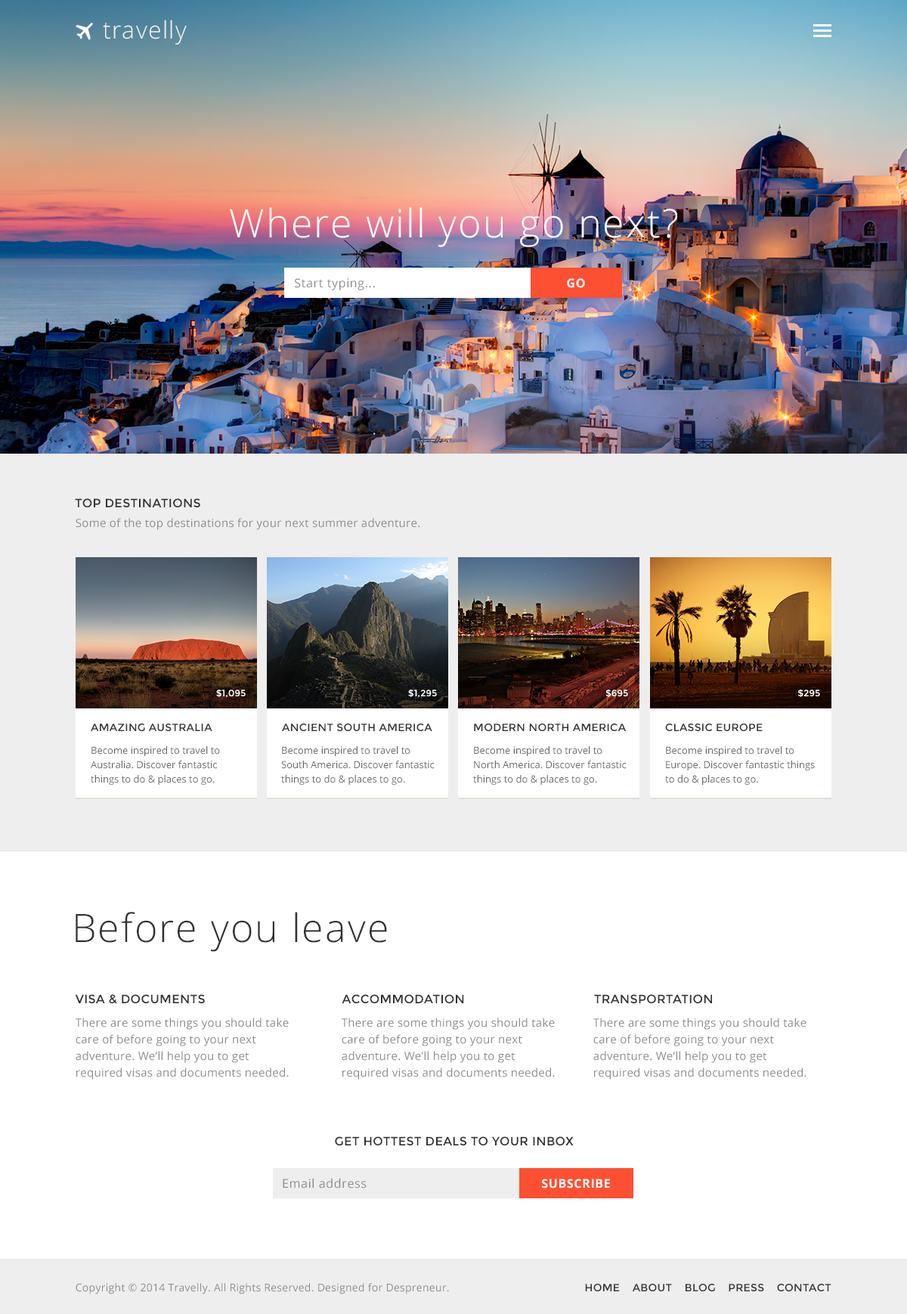
<style>
.page{position:relative;width:907px;height:1314px;background:#ffffff}
.page>*{position:absolute;margin:0}
.t1{font:24.2px "OpenSans-Light";letter-spacing:0.04em;color:#f4f3ee}
.t2{font:39.3px "OpenSans-Light";letter-spacing:0.04em;color:#ffffff}
.t3{font:12.1px "OpenSans";letter-spacing:0.04em;color:#8b8b8b}
.t4{font:12.1px "OpenSans-Bold";letter-spacing:0.04em;color:#ffffff}
.t5{font:12.1px "Montserrat-Regular";letter-spacing:0.02em;color:#323232;text-transform:uppercase}
.t6{font:11.3px "OpenSans";letter-spacing:0.02em;color:#8b8b8b}
.t7{font:9.1px "Montserrat-Regular";letter-spacing:0.02em;color:#ffffff;text-transform:uppercase}
.t8{font:10.6px "Montserrat-Regular";letter-spacing:0.02em;color:#323232;text-transform:uppercase}
.t9{font:9.8px/14.4px "OpenSans";color:#696969}
.t10{font:39.3px "OpenSans-Light";letter-spacing:0.04em;color:#323232}
.t11{font:11.3px/16.6px "OpenSans";letter-spacing:0.02em;color:#8b8b8b}
.t12{font:10.6px "OpenSans";letter-spacing:0.02em;color:#8b8b8b}
</style>
<div class="page">
<p class="t1" style="left:103px;top:20px;width:84px;height:25px">travelly</p>
<p class="t2" style="left:230px;top:207px;width:448px;height:40px">Where will you go next?</p>
<p class="t3" style="left:295px;top:278px;width:80px;height:12px">Start typing...</p>
<p class="t4" style="left:567px;top:278px;width:18px;height:10px">GO</p>
<p class="t5" style="left:75px;top:498px;width:125px;height:10px">Top destinations</p>
<p class="t6" style="left:76px;top:518px;width:344px;height:12px">Some of the top destinations for your next summer adventure.</p>
<p class="t7" style="left:216px;top:690px;width:30px;height:8px">$1,095</p>
<p class="t7" style="left:408px;top:690px;width:29px;height:8px">$1,295</p>
<p class="t7" style="left:606px;top:690px;width:22px;height:7px">$695</p>
<p class="t7" style="left:798px;top:690px;width:22px;height:7px">$295</p>
<p class="t8" style="left:91px;top:724px;width:121px;height:7px">Amazing Australia</p>
<p class="t8" style="left:282px;top:724px;width:151px;height:7px">ancient south america</p>
<p class="t8" style="left:474px;top:724px;width:153px;height:7px">modern north america</p>
<p class="t8" style="left:665px;top:724px;width:98px;height:7px">Classic europe</p>
<p class="t9" style="left:91px;top:746px;width:129px;height:39px">Become inspired to travel to Australia. Discover fantastic things to do &amp; places to go.</p>
<p class="t9" style="left:281px;top:746px;width:154px;height:39px">Become inspired to travel to South America. Discover fantastic things to do &amp; places to go.</p>
<p class="t9" style="left:473px;top:746px;width:154px;height:39px">Become inspired to travel to North America. Discover fantastic things to do &amp; places to go.</p>
<p class="t9" style="left:665px;top:746px;width:150px;height:39px">Become inspired to travel to Europe. Discover fantastic things to do &amp; places to go.</p>
<p class="t10" style="left:76px;top:912px;width:311px;height:40px">Before you leave</p>
<p class="t5" style="left:75px;top:994px;width:130px;height:10px">visa &amp; documents</p>
<p class="t5" style="left:342px;top:994px;width:122px;height:10px">Accommodation</p>
<p class="t5" style="left:594px;top:994px;width:118px;height:10px">transportation</p>
<p class="t11" style="left:76px;top:1018px;width:213px;height:62px">There are some things you should take<br>care of before going to your next<br>adventure. We’ll help you to get<br>required visas and documents needed.</p>
<p class="t11" style="left:342px;top:1018px;width:213px;height:62px">There are some things you should take<br>care of before going to your next<br>adventure. We’ll help you to get<br>required visas and documents needed.</p>
<p class="t11" style="left:594px;top:1018px;width:213px;height:62px">There are some things you should take<br>care of before going to your next<br>adventure. We’ll help you to get<br>required visas and documents needed.</p>
<p class="t5" style="left:335px;top:1136px;width:239px;height:10px">get hottest deals to your inbox</p>
<p class="t3" style="left:283px;top:1178px;width:84px;height:11px">Email address</p>
<p class="t4" style="left:542px;top:1179px;width:68px;height:10px">SUBSCRIBE</p>
<p class="t12" style="left:76px;top:1283px;width:373px;height:12px">Copyright © 2014 Travelly. All Rights Reserved. Designed for Despreneur.</p>
<p class="t8" style="left:585px;top:1284px;width:247px;height:7px">Home    about    blog    press    contact</p>
</div>
